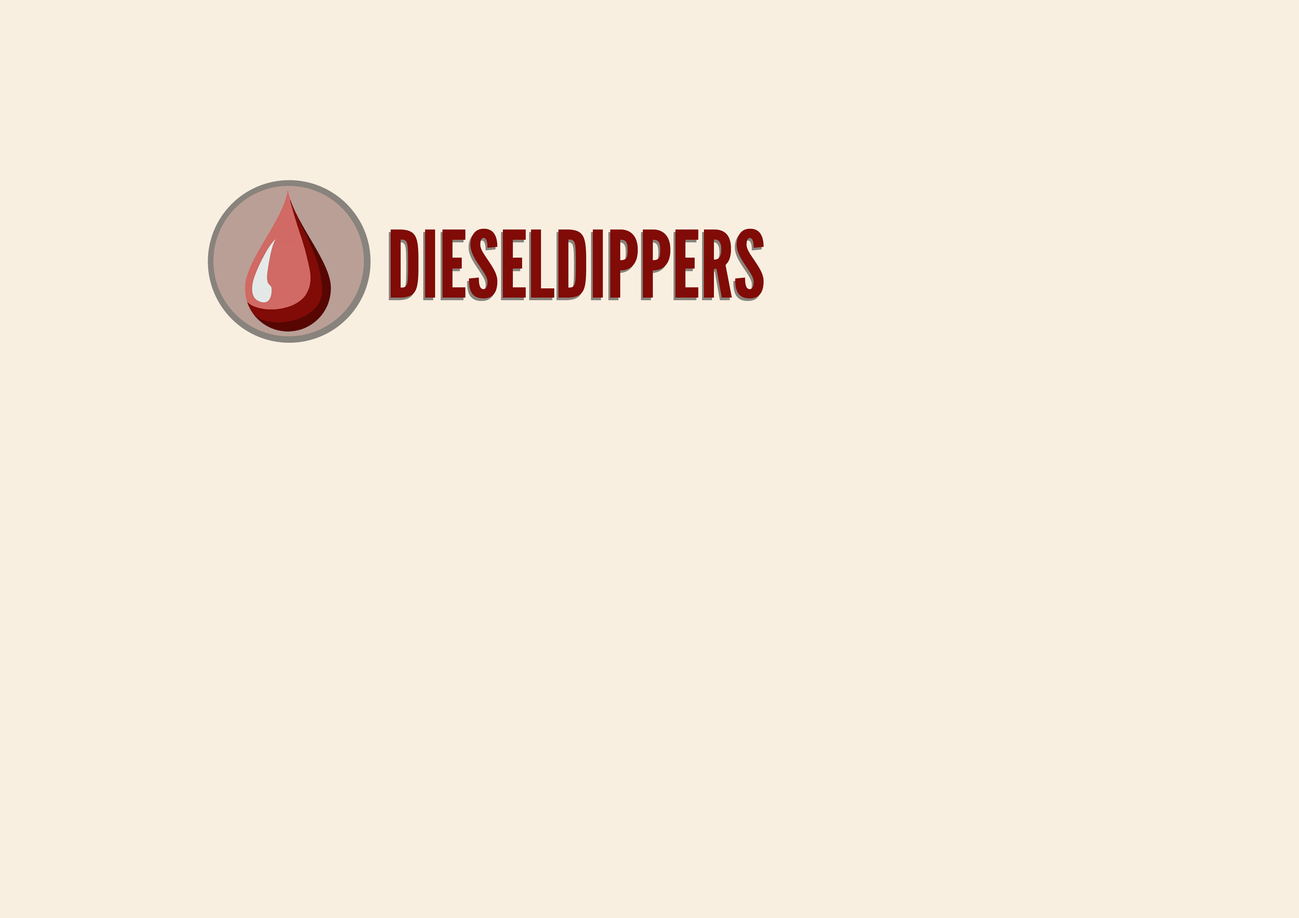
<style>
.page{position:relative;width:1299px;height:918px;background:#f8efe1}
.page>*{position:absolute;margin:0}
.t1{font:92.6px "LeagueGothic";color:#810b06}
</style>
<div class="page">
<p class="t1" style="left:391px;top:229px;width:372px;height:69px">DIESELDIPPERS</p>
</div>
